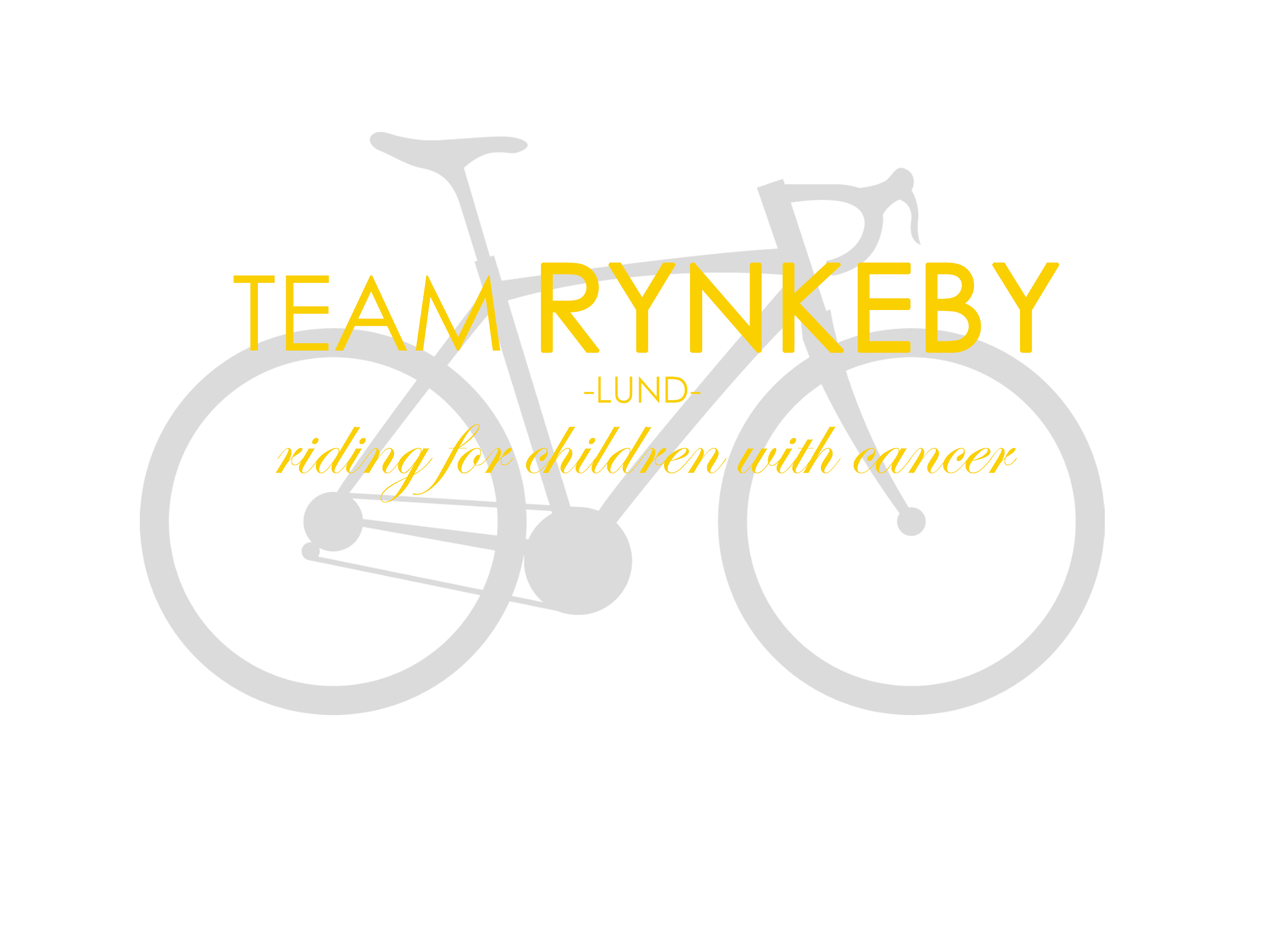
<style>
.page{position:relative;width:1287px;height:927px;background:#ffffff}
.page>*{position:absolute;margin:0}
.t1{font:121.1px "CenturyGothic";color:#fad000;font-weight:bold}
.t2{font:104.5px "CenturyGothic";color:#fad000}
.t3{font:36.2px "CenturyGothic";color:#fad000}
.t4{font:91.8px "EdwardianScriptITC";color:#fad000}
</style>
<div class="page">
<p class="t1" style="left:541px;top:262px;width:518px;height:91px">RYNKEBY</p>
<p class="t2" style="left:233px;top:275px;width:268px;height:75px">TEAM</p>
<p class="t3" style="left:584px;top:376px;width:116px;height:27px">-LUND-</p>
<p class="t4" style="left:275px;top:424px;width:742px;height:78px">riding for children with cancer</p>
</div>
